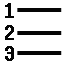
<style>
.page{position:relative;width:64px;height:64px;background:#ffffff}
.page>*{position:absolute;margin:0}
.t1{font:17.9px "Terminal";color:#050505;font-weight:bold}
</style>
<div class="page">
<p class="t1" style="left:5px;top:3px;width:9px;height:58px">1<br>2<br>3</p>
</div>
